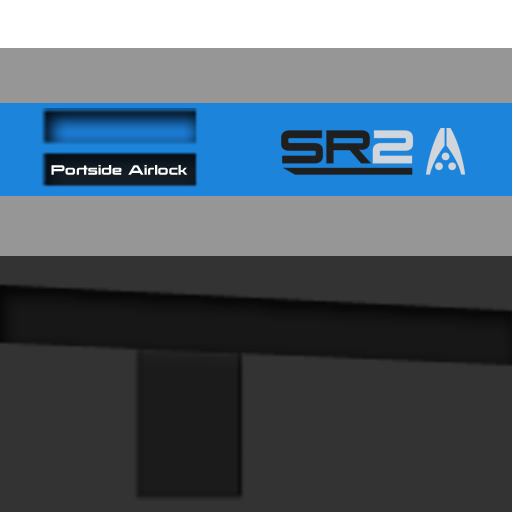
<style>
.page{position:relative;width:512px;height:512px;background:#333333}
.page>*{position:absolute;margin:0}
.t1{font:12.1px "Korataki";color:#ffffff}
</style>
<div class="page">
<p class="t1" style="left:51px;top:165px;width:137px;height:10px">Portside Airlock</p>
</div>
